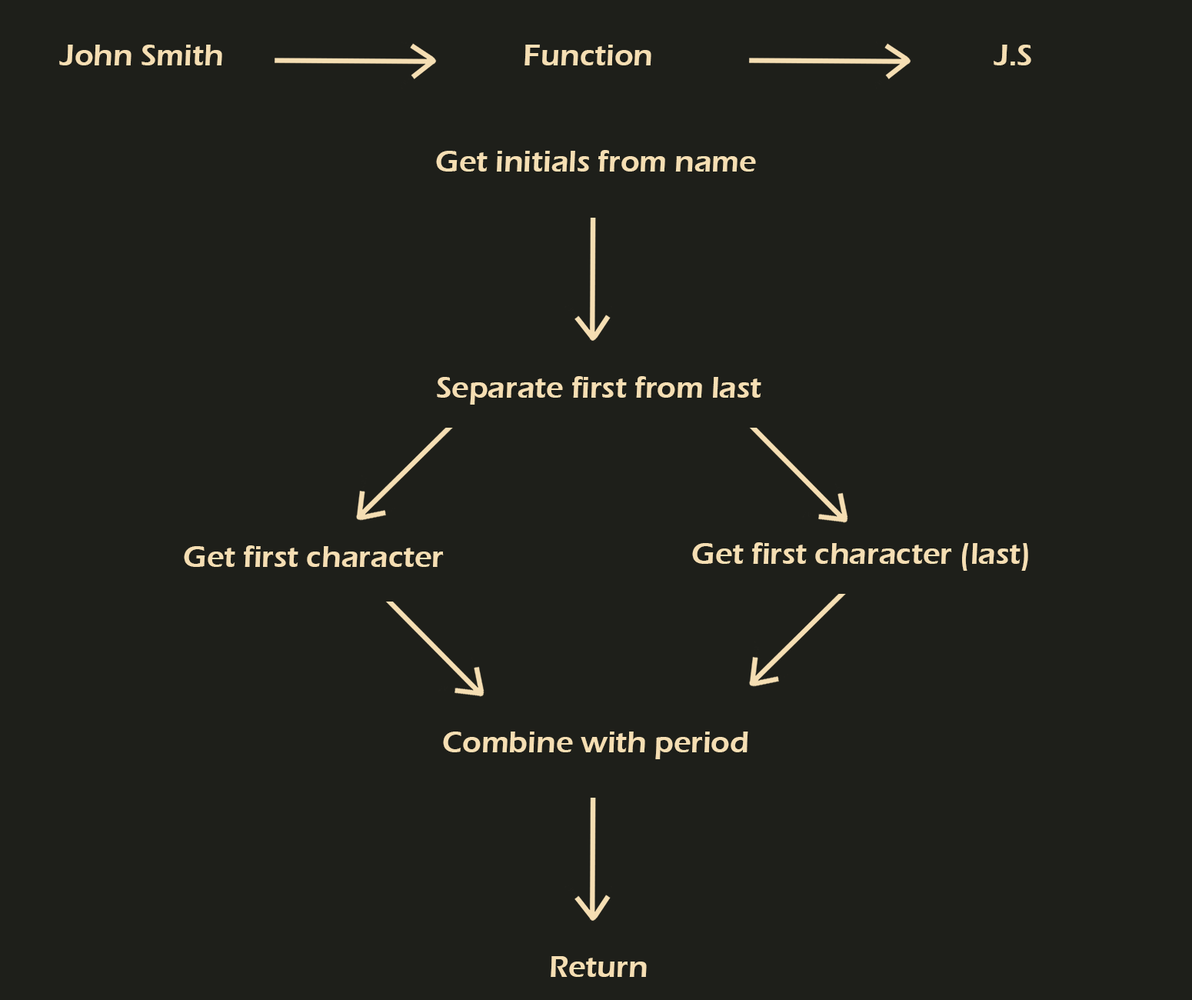
<style>
.page{position:relative;width:1192px;height:1000px;background:#1e1f1a}
.page>*{position:absolute;margin:0}
.t1{font:30.8px "ErasITC-Demi";color:#f5deb3}
</style>
<div class="page">
<p class="t1" style="left:59px;top:45px;width:163px;height:20px">John Smith</p>
<p class="t1" style="left:525px;top:45px;width:127px;height:20px">Function</p>
<p class="t1" style="left:994px;top:45px;width:38px;height:20px">J.S</p>
<p class="t1" style="left:436px;top:150px;width:320px;height:22px">Get initials from name</p>
<p class="t1" style="left:437px;top:376px;width:325px;height:29px">Separate first from last</p>
<p class="t1" style="left:184px;top:545px;width:260px;height:22px">Get first character</p>
<p class="t1" style="left:692px;top:542px;width:337px;height:29px">Get first character (last)</p>
<p class="t1" style="left:443px;top:732px;width:306px;height:27px">Combine with period</p>
<p class="t1" style="left:551px;top:956px;width:96px;height:21px">Return</p>
</div>
